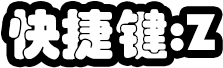
<style>
.page{position:relative;width:223px;height:68px;background:#ffffff}
.page>*{position:absolute;margin:0}
.t1{font:53.2px "STHupo";color:#ffffff}
</style>
<div class="page">
<p class="t1" style="left:9px;top:9px;width:206px;height:51px">快捷键:Z</p>
</div>
